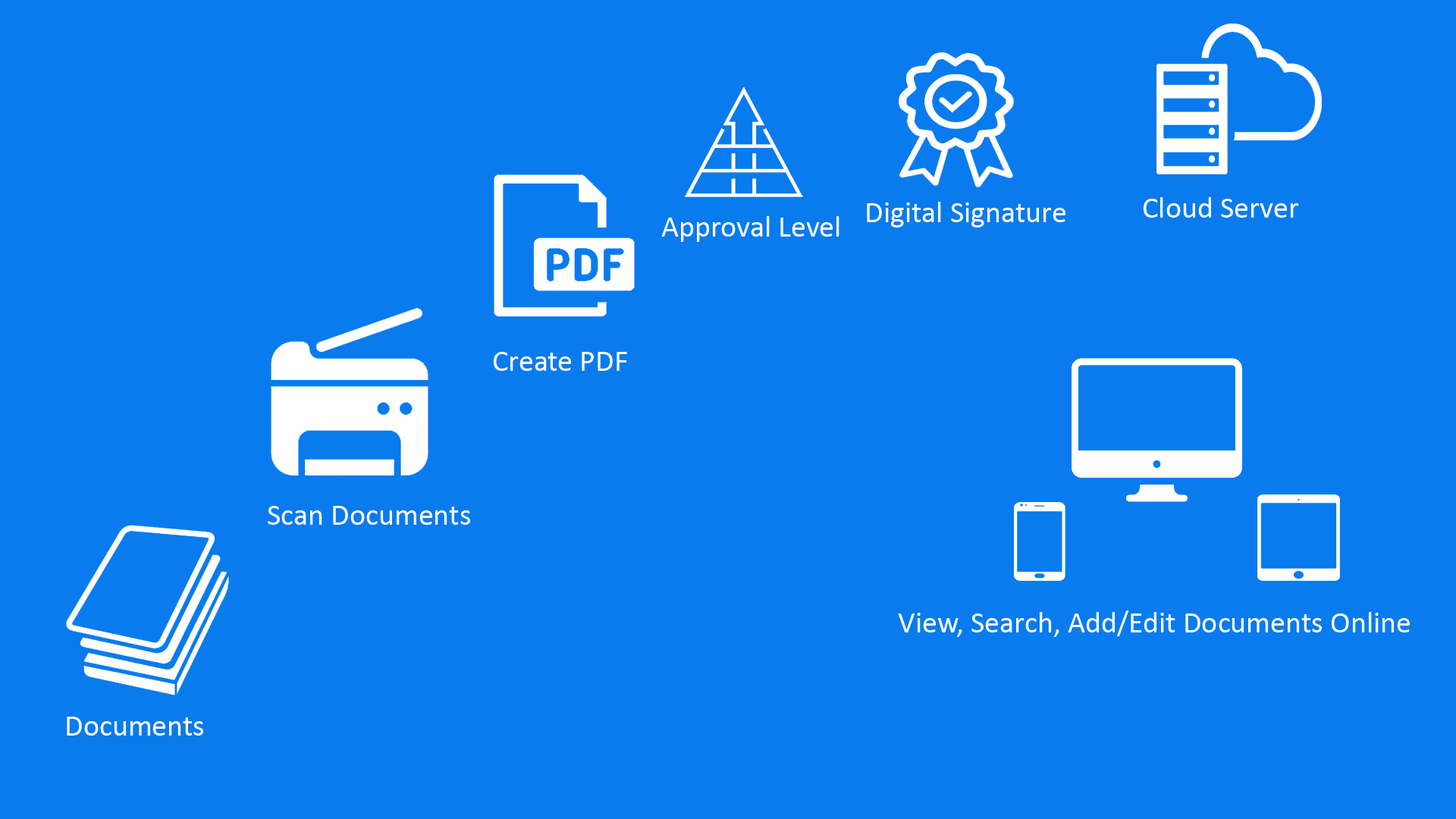
<style>
.page{position:relative;width:1456px;height:819px;background:#097bee}
.page>*{position:absolute;margin:0}
.t1{font:30.3px "Calibri";color:#ffffff}
</style>
<div class="page">
<p class="t1" style="left:1143px;top:197px;width:156px;height:21px">Cloud Server</p>
<p class="t1" style="left:867px;top:202px;width:198px;height:25px">Digital Signature</p>
<p class="t1" style="left:661px;top:216px;width:178px;height:26px">Approval Level</p>
<p class="t1" style="left:493px;top:352px;width:134px;height:19px">Create PDF</p>
<p class="t1" style="left:268px;top:506px;width:202px;height:19px">Scan Documents</p>
<p class="t1" style="left:898px;top:610px;width:512px;height:27px">View, Search, Add/Edit Documents Online</p>
<p class="t1" style="left:67px;top:717px;width:136px;height:19px">Documents</p>
</div>
